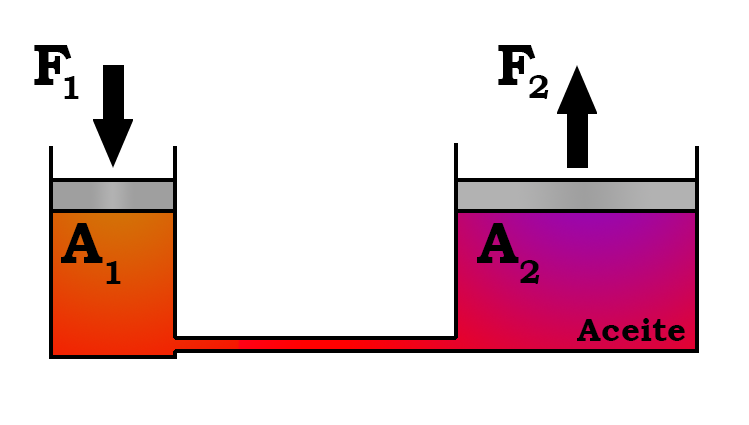
<style>
.page{position:relative;width:749px;height:425px;background:#ffffff}
.page>*{position:absolute;margin:0}
.t1{font:58.3px "BookmanOldStyle-Bold";color:#000000}
.t2{font:33.3px "BookmanOldStyle-Bold";color:#000000}
</style>
<div class="page">
<p class="t1" style="left:34px;top:45px;width:38px;height:40px">F</p>
<p class="t1" style="left:498px;top:45px;width:38px;height:40px">F</p>
<p class="t2" style="left:64px;top:76px;width:15px;height:23px">1</p>
<p class="t2" style="left:529px;top:75px;width:20px;height:24px">2</p>
<p class="t1" style="left:61px;top:223px;width:42px;height:40px">A</p>
<p class="t1" style="left:477px;top:223px;width:42px;height:40px">A</p>
<p class="t2" style="left:106px;top:261px;width:15px;height:23px">1</p>
<p class="t2" style="left:520px;top:260px;width:20px;height:24px">2</p>
<p class="t2" style="left:577px;top:318px;width:108px;height:23px">Aceite</p>
</div>
